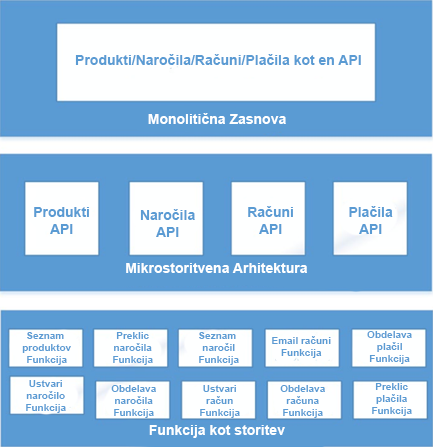
<style>
.page{position:relative;width:433px;height:447px;background:#5a9bd3}
.page>*{position:absolute;margin:0}
.t1{font:14px "Arial-BoldMT";color:#5a9bd3}
.t2{font:14px "Arial-BoldMT";color:#feffff}
.t3{font:10px "Arial-BoldMT";color:#5a9bd3}
</style>
<div class="page">
<p class="t1" style="left:75px;top:54px;width:286px;height:11px">Produkti/Naročila/Računi/Plačila kot en API</p>
<p class="t2" style="left:148px;top:113px;width:138px;height:11px">Monolitična Zasnova</p>
<p class="t1" style="left:34px;top:207px;width:55px;height:27px;text-align:center">Produkti<br>API</p>
<p class="t1" style="left:140px;top:209px;width:55px;height:28px;text-align:center">Naročila<br>API</p>
<p class="t1" style="left:248px;top:206px;width:45px;height:28px;text-align:center">Računi<br>API</p>
<p class="t1" style="left:349px;top:206px;width:44px;height:28px;text-align:center">Plačila<br>API</p>
<p class="t2" style="left:126px;top:263px;width:181px;height:10px">Mikrostoritvena Arhitektura</p>
<p class="t3" style="left:22px;top:332px;width:49px;height:33px;text-align:center">Seznam <br>produktov<br>Funkcija</p>
<p class="t3" style="left:113px;top:332px;width:40px;height:33px;text-align:center">Preklic<br>naročila<br>Funkcija</p>
<p class="t3" style="left:199px;top:332px;width:40px;height:33px;text-align:center">Seznam <br>naročil<br>Funkcija</p>
<p class="t3" style="left:272px;top:336px;width:59px;height:22px;text-align:center">Email računi<br>Funkcija</p>
<p class="t3" style="left:367px;top:331px;width:45px;height:33px;text-align:center">Obdelava<br>plačil<br>Funkcija</p>
<p class="t3" style="left:26px;top:380px;width:40px;height:33px;text-align:center">Ustvari<br>naročilo<br>Funkcija</p>
<p class="t3" style="left:111px;top:385px;width:45px;height:33px;text-align:center">Obdelava<br>naročila<br>Funkcija</p>
<p class="t3" style="left:200px;top:385px;width:40px;height:33px;text-align:center">Ustvari<br>račun<br>Funkcija</p>
<p class="t3" style="left:280px;top:385px;width:45px;height:33px;text-align:center">Obdelava<br>računa<br>Funkcija</p>
<p class="t3" style="left:372px;top:383px;width:40px;height:33px;text-align:center">Preklic<br>plačila<br>Funkcija</p>
<p class="t2" style="left:149px;top:425px;width:136px;height:13px">Funkcija kot storitev</p>
</div>
